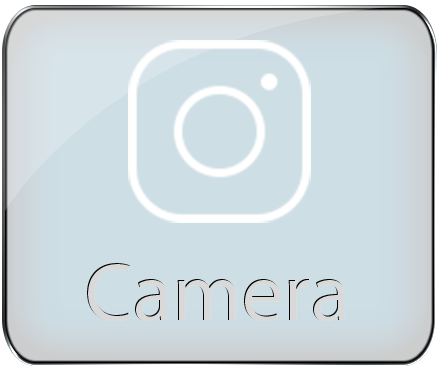
<style>
.page{position:relative;width:440px;height:369px;background:#cddee5}
.page>*{position:absolute;margin:0}
.t1{font:83.2px "MyriadPro-Regular";color:#d9d9d9}
</style>
<div class="page">
<p class="t1" style="left:87px;top:263px;width:258px;height:58px">Camera</p>
</div>
